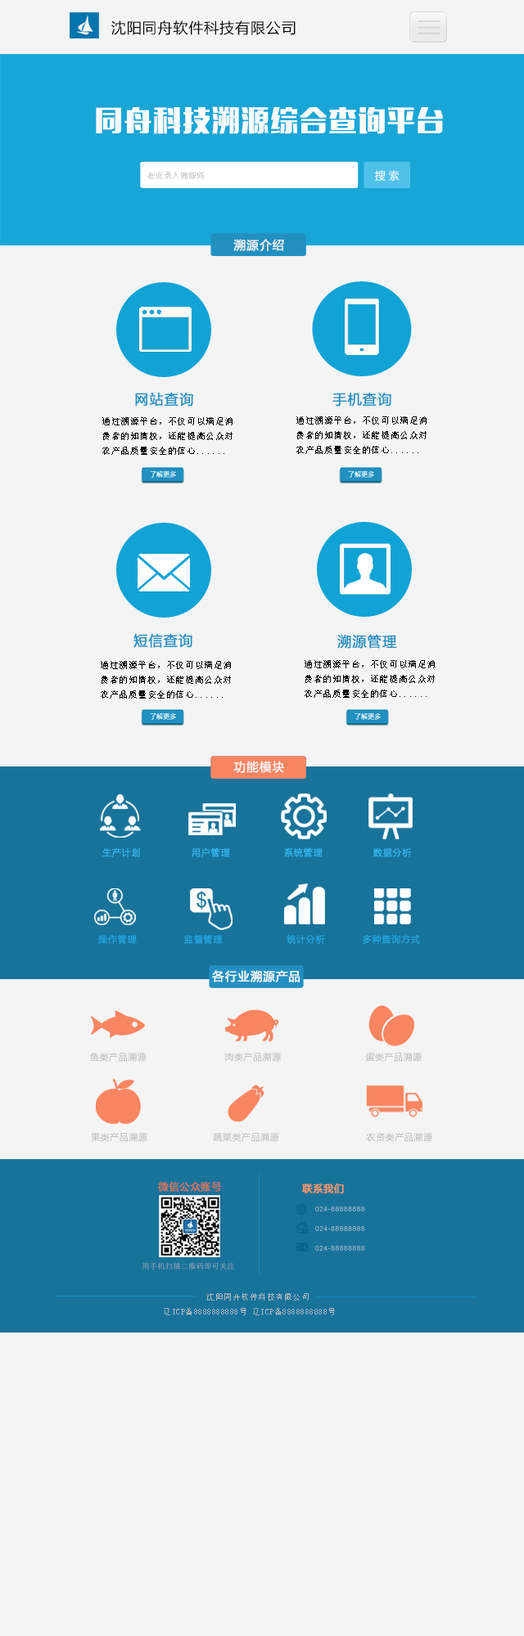
<style>
.page{position:relative;width:524px;height:1636px;background:#f4f4f4}
.page>*{position:absolute;margin:0}
.t1{font:14.7px "MicrosoftYaHei";letter-spacing:0.05em;color:#030303}
.t2{font:27.8px "MFLiHei_Noncommercial-Regular";letter-spacing:0.05em;color:#ffffff}
.t3{font:8.2px "SimSun";color:#cdd0d0}
.t4{font:10.6px "MicrosoftYaHei";color:#ffffff;text-transform:uppercase}
.t5{font:11.9px "MicrosoftYaHei";letter-spacing:0.05em;color:#f4f4f4;font-weight:bold}
.t6{font:13.9px "MicrosoftYaHei";letter-spacing:0.05em;color:#2190c1;font-weight:bold}
.t7{font:9px/14.7px "SimSun";letter-spacing:0.05em;color:#030303}
.t8{font:9px "MicrosoftYaHei";letter-spacing:0.05em;color:#35b7f0;font-weight:bold}
.t9{font:9px "MicrosoftYaHei";letter-spacing:0.05em;color:#24a8e3;font-weight:bold}
.t10{font:11.8px "MicrosoftYaHei";letter-spacing:0.05em;color:#ffffff;font-weight:bold}
.t11{font:9px "MicrosoftYaHei";letter-spacing:0.05em;color:#b6b3b3}
.t12{font:9.8px "MicrosoftYaHei";letter-spacing:0.05em;color:#d0755c;font-weight:bold}
.t13{font:9.8px "MicrosoftYaHei";letter-spacing:0.05em;color:#ff9966;font-weight:bold}
.t14{font:6.5px/19.6px "ArialMT";letter-spacing:0.1em}
.t15{font:7.4px "SimSun";letter-spacing:0.05em;color:#acb5be}
.t16{font:8.2px "SimSun";letter-spacing:0.05em;color:#acb5be}
</style>
<div class="page">
<p class="t1" style="left:111px;top:20px;width:184px;height:15px">沈阳同舟软件科技有限公司</p>
<p class="t2" style="left:96px;top:106px;width:347px;height:28px">同舟科技溯源综合查询平台</p>
<p class="t3" style="left:147px;top:172px;width:57px;height:7px">在此录入溯源码</p>
<p class="t4" style="left:375px;top:170px;width:24px;height:11px">搜 索</p>
<p class="t5" style="left:233px;top:239px;width:51px;height:12px">溯源介绍</p>
<p class="t6" style="left:135px;top:392px;width:58px;height:15px">网站查询</p>
<p class="t6" style="left:332px;top:392px;width:59px;height:15px">手机查询</p>
<p class="t7" style="left:102px;top:417px;width:130px;height:38px">通过溯源平台，不仅可以满足消<br>费者的知情权，还能提高公众对<br>农产品质量安全的信心......</p>
<p class="t7" style="left:296px;top:416px;width:130px;height:38px">通过溯源平台，不仅可以满足消<br>费者的知情权，还能提高公众对<br>农产品质量安全的信心......</p>
<p class="t6" style="left:133px;top:633px;width:59px;height:15px">短信查询</p>
<p class="t6" style="left:337px;top:634px;width:60px;height:15px">溯源管理</p>
<p class="t7" style="left:101px;top:661px;width:130px;height:38px">通过溯源平台，不仅可以满足消<br>费者的知情权，还能提高公众对<br>农产品质量安全的信心......</p>
<p class="t7" style="left:304px;top:660px;width:130px;height:38px">通过溯源平台，不仅可以满足消<br>费者的知情权，还能提高公众对<br>农产品质量安全的信心......</p>
<p class="t5" style="left:233px;top:761px;width:51px;height:12px">功能模块</p>
<p class="t8" style="left:102px;top:848px;width:310px;height:9px">生产计划               用户管理                系统管理               数据分析</p>
<p class="t9" style="left:98px;top:934px;width:322px;height:10px">操作管理              监督管理                   统计分析           多种查询方式</p>
<p class="t10" style="left:212px;top:970px;width:87px;height:13px">各行业溯源产品</p>
<p class="t11" style="left:90px;top:1052px;width:331px;height:10px">鱼类产品溯源                         肉类产品溯源                           蛋类产品溯源</p>
<p class="t11" style="left:91px;top:1132px;width:341px;height:10px">果类产品溯源                     蔬菜类产品溯源                            农资类产品溯源</p>
<p class="t12" style="left:158px;top:1181px;width:64px;height:11px">微信公众账号</p>
<p class="t13" style="left:302px;top:1184px;width:42px;height:10px">联系我们</p>
<p class="t14" style="left:315px;top:1207px;width:50px;height:44px;text-align:justify">024-88888888<br>024-88888888<br>024-88888888</p>
<p class="t15" style="left:142px;top:1262px;width:92px;height:8px">用手机扫描二维码即可关注</p>
<p class="t16" style="left:206px;top:1294px;width:102px;height:7px">沈阳同舟软件科技有限公司</p>
<p class="t16" style="left:164px;top:1308px;width:171px;height:8px">辽ICP备8888888888号 辽ICP备8888888888号</p>
</div>
